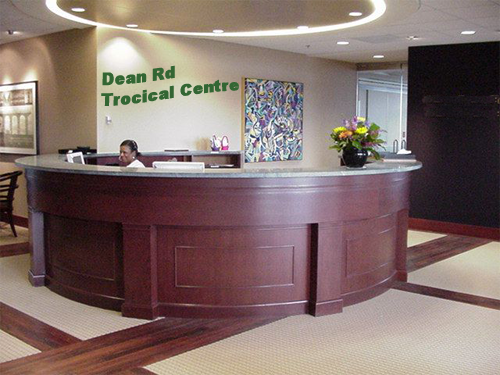
<style>
.page{position:relative;width:500px;height:375px}
.page>*{position:absolute;margin:0}
.t1{font:16.5px "Arial-Black";color:#336633}
</style>
<div class="page">
<p class="t1" style="left:101px;top:65px;width:138px;height:41px">Dean Rd<br>Trocical Centre</p>
</div>
